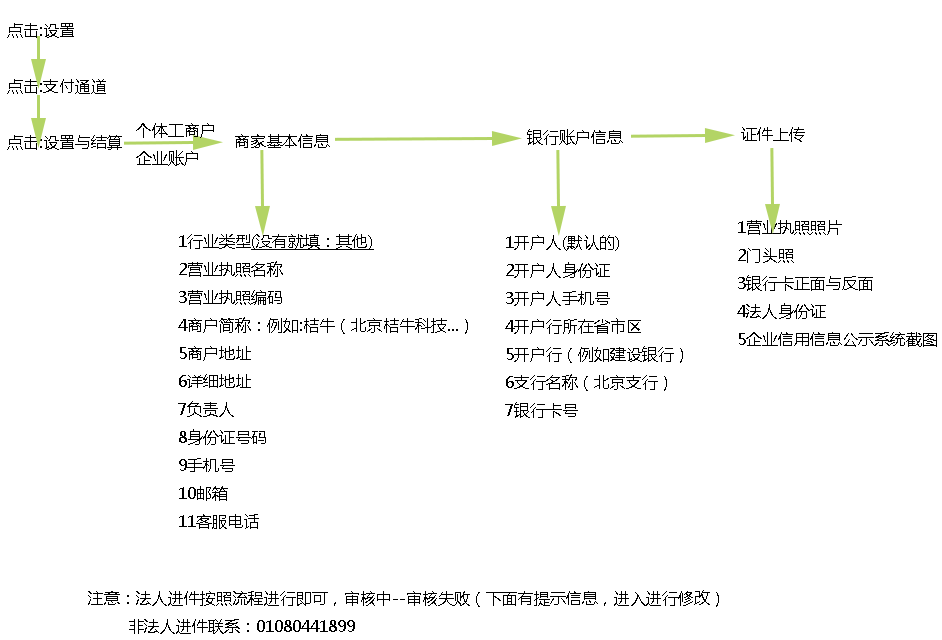
<style>
.page{position:relative;width:942px;height:640px;background:#ffffff}
.page>*{position:absolute;margin:0}
.t1{font:16px "MicrosoftYaHei";color:#000000}
.t2{font:16px "MicrosoftYaHei";color:#000000;text-decoration:underline}
</style>
<div class="page">
<p class="t1" style="left:7px;top:23px;width:115px;height:127px">点击:设置<br><br>点击:支付通道<br><br>点击:设置与结算</p>
<p class="t1" style="left:136px;top:123px;width:78px;height:43px">个体工商户<br>企业账户</p>
<p class="t1" style="left:235px;top:134px;width:95px;height:14px">商家基本信息</p>
<p class="t1" style="left:527px;top:129px;width:96px;height:16px">银行账户信息</p>
<p class="t1" style="left:741px;top:127px;width:64px;height:15px">证件上传</p>
<p class="t1" style="left:737px;top:220px;width:200px;height:127px">1营业执照照片<br>2门头照<br>3银行卡正面与反面<br>4法人身份证<br>5企业信用信息公示系统截图</p>
<p class="t1" style="left:178px;top:234px;width:290px;height:295px">1行业类型<span class="t2">(没有就填：其他)<br></span>2营业执照名称<br>3营业执照编码<br>4商户简称：例如:桔牛（北京桔牛科技...）<br>5商户地址<br>6详细地址<br>7负责人<br>8身份证号码<br>9手机号<br>10邮箱<br>11客服电话</p>
<p class="t1" style="left:505px;top:235px;width:178px;height:183px">1开户人(默认的)<br>2开户人身份证<br>3开户人手机号<br>4开户行所在省市区<br>5开户行（例如建设银行）<br>6支行名称（北京支行）<br>7银行卡号</p>
<p class="t1" style="left:88px;top:590px;width:631px;height:44px">注意：法人进件按照流程进行即可，审核中--审核失败（下面有提示信息，进入进行修改）<br>        非法人进件联系：01080441899</p>
</div>
